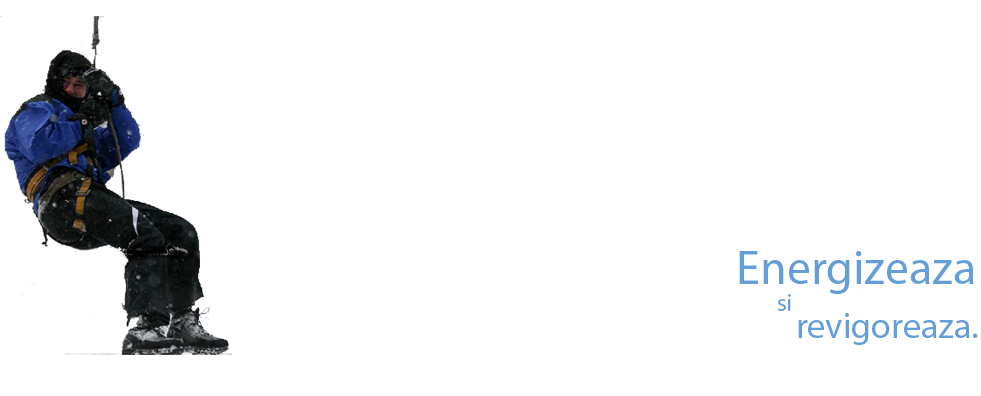
<style>
.page{position:relative;width:981px;height:396px;background:#ffffff}
.page>*{position:absolute;margin:0}
.t1{font:48px "MyriadPro-Regular";color:#639edb}
.t2{font:24px "MyriadPro-Regular";color:#639edb}
</style>
<div class="page">
<p class="t1" style="left:739px;top:251px;width:235px;height:43px">Energizeaza</p>
<p class="t2" style="left:777px;top:294px;width:14px;height:17px">si</p>
</div>
